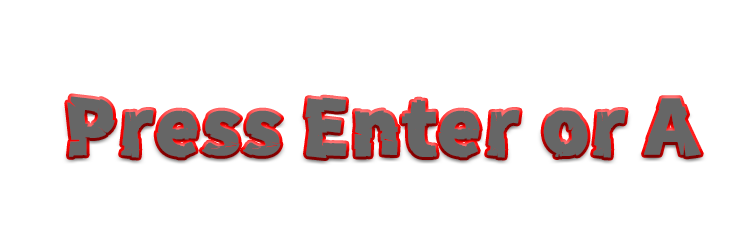
<style>
.page{position:relative;width:752px;height:234px;background:#ffffff}
.page>*{position:absolute;margin:0}
.t1{font:75px "ZeroGothic";color:#666666;font-weight:bold}
</style>
<div class="page">
<p class="t1" style="left:67px;top:96px;width:634px;height:62px">Press Enter or A</p>
</div>
